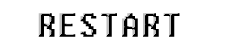
<style>
.page{position:relative;width:250px;height:50px;background:#ffffff}
.page>*{position:absolute;margin:0}
.t1{font:33.3px "Fixedsys";color:#000000}
</style>
<div class="page">
<p class="t1" style="left:38px;top:13px;width:142px;height:24px">RESTART</p>
</div>
